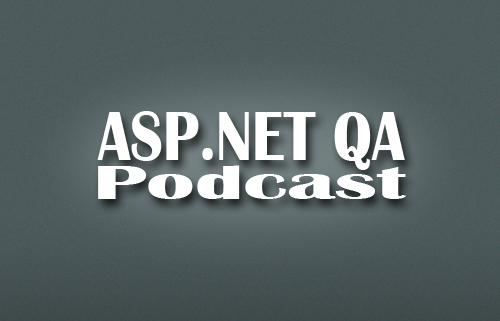
<style>
.page{position:relative;width:500px;height:321px}
.page>*{position:absolute;margin:0}
.t1{font:72px "BritannicBold";color:#ffffff;scale:0.83 1}
.t2{font:50px "BritannicBold";color:#ffffff;scale:1.79 1}
</style>
<div class="page">
<p class="t1" style="left:97px;top:111px;width:308px;height:59px">ASP.NET QA</p>
<p class="t2" style="left:98px;top:165px;width:309px;height:34px">Podcast</p>
</div>
